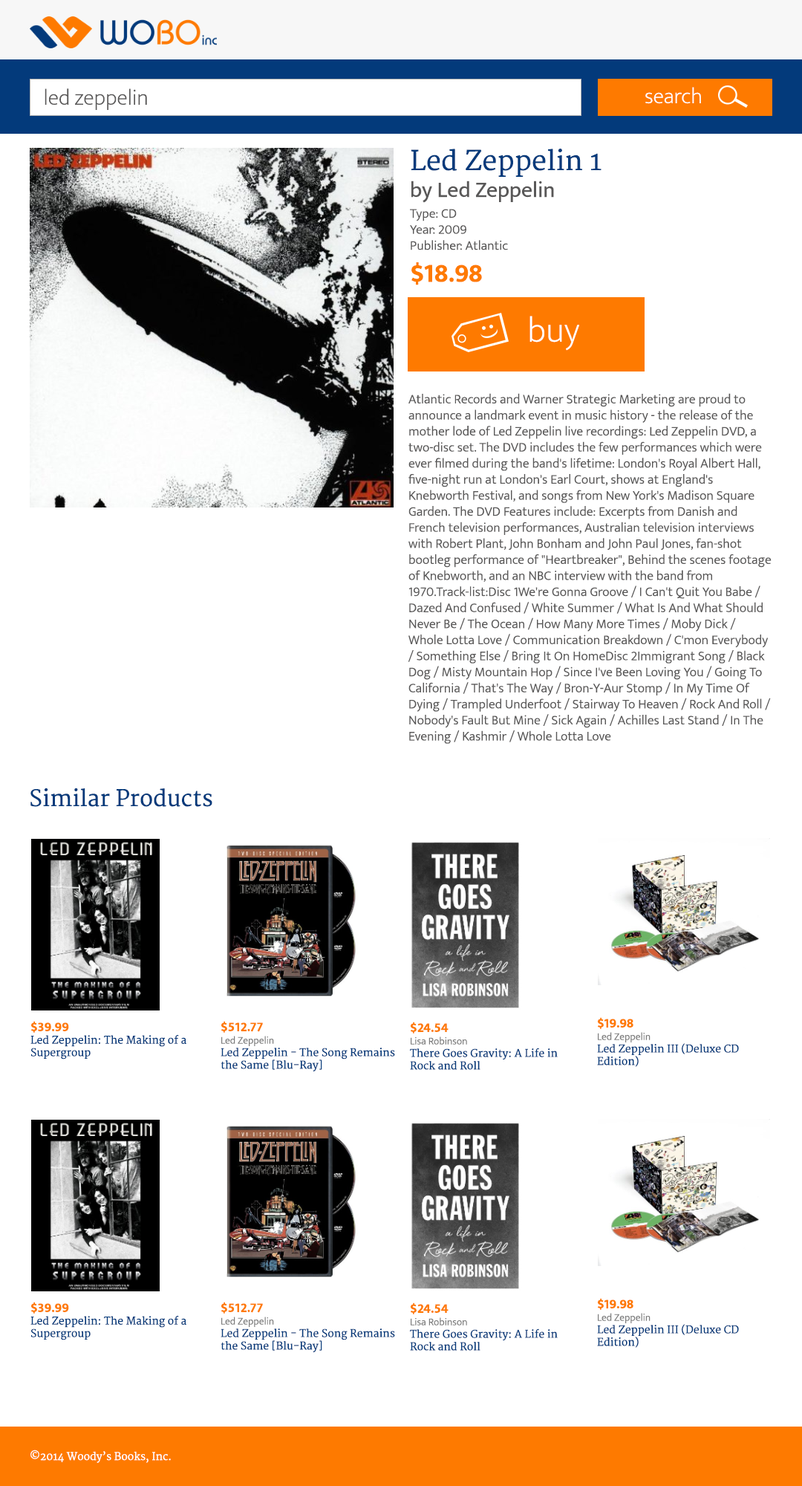
<style>
.page{position:relative;width:802px;height:1486px;background:#ffffff}
.page>*{position:absolute;margin:0}
.t1{font:22.3px "EkMukta-ExtraLight";color:#595858}
.t2{font:22.3px "EkMukta-ExtraLight";color:#ffffff}
.t3{font:13.4px "EkMukta-Light";color:#595858}
.t4{font:26.8px "Merriweather";color:#033a7b}
.t5{font:22.3px "EkMukta-Regular";color:#595858}
.t6{font:13.4px/20.8px "EkMukta-Light";color:#595858}
.t7{font:26.8px "EkMukta-Bold";color:#fe7a00}
.t8{font:35.7px "EkMukta-ExtraLight";color:#ffffff}
.t9{font:22.3px "Merriweather";color:#033a7b}
.t10{font:10.4px "Merriweather";color:#033a7b}
.t11{font:13.4px "EkMukta-Bold";color:#fe7a00}
.t12{font:10.4px "EkMukta-Light";color:#7b7b7b}
.t13{font:10.4px "Merriweather";color:#ffffff}
</style>
<div class="page">
<p class="t1" style="left:45px;top:88px;width:102px;height:22px">led zeppelin</p>
<p class="t2" style="left:646px;top:87px;width:55px;height:17px">search</p>
<p class="t3" style="left:410px;top:149px;width:192px;height:136px"><span class="t4">Led Zeppelin 1<br></span><span class="t5">by Led Zeppelin<br></span><span class="t6">Type: CD<br></span>Year: 2009<br>Publisher: Atlantic<br><span class="t7">$18.98</span></p>
<p class="t8" style="left:530px;top:316px;width:50px;height:35px">buy</p>
<p class="t3" style="left:408px;top:393px;width:364px;height:351px">Atlantic Records and Warner Strategic Marketing are proud to announce a landmark event in music history - the release of the mother lode of Led Zeppelin live recordings: Led Zeppelin DVD, a two-disc set. The DVD includes the few performances which were ever filmed during the band's lifetime: London's Royal Albert Hall, five-night run at London's Earl Court, shows at England's Knebworth Festival, and songs from New York's Madison Square Garden. The DVD Features include: Excerpts from Danish and French television performances, Australian television interviews with Robert Plant, John Bonham and John Paul Jones, fan-shot bootleg performance of "Heartbreaker", Behind the scenes footage of Knebworth, and an NBC interview with the band from 1970.Track-list:Disc 1We're Gonna Groove / I Can't Quit You Babe / Dazed And Confused / White Summer / What Is And What Should Never Be / The Ocean / How Many More Times / Moby Dick / Whole Lotta Love / Communication Breakdown / C'mon Everybody / Something Else / Bring It On HomeDisc 2Immigrant Song / Black Dog / Misty Mountain Hop / Since I've Been Loving You / Going To California / That's The Way / Bron-Y-Aur Stomp / In My Time Of Dying / Trampled Underfoot / Stairway To Heaven / Rock And Roll / Nobody's Fault But Mine / Sick Again / Achilles Last Stand / In The Evening / Kashmir / Whole Lotta Love</p>
<p class="t9" style="left:30px;top:788px;width:182px;height:19px">Similar Products</p>
<p class="t10" style="left:30px;top:1021px;width:156px;height:39px"><span class="t11">$39.99<br></span>Led Zeppelin: The Making of a Supergroup</p>
<p class="t10" style="left:221px;top:1021px;width:174px;height:50px"><span class="t11">$512.77<br></span><span class="t12">Led Zeppelin<br></span>Led Zeppelin - The Song Remains the Same [Blu-Ray]</p>
<p class="t10" style="left:410px;top:1022px;width:148px;height:48px"><span class="t11">$24.54<br></span><span class="t12">Lisa Robinson<br></span>There Goes Gravity: A Life in Rock and Roll</p>
<p class="t10" style="left:597px;top:1017px;width:142px;height:50px"><span class="t11">$19.98<br></span><span class="t12">Led Zeppelin<br></span>Led Zeppelin III (Deluxe CD Edition)</p>
<p class="t10" style="left:30px;top:1302px;width:156px;height:38px"><span class="t11">$39.99<br></span>Led Zeppelin: The Making of a Supergroup</p>
<p class="t10" style="left:221px;top:1302px;width:174px;height:50px"><span class="t11">$512.77<br></span><span class="t12">Led Zeppelin<br></span>Led Zeppelin - The Song Remains the Same [Blu-Ray]</p>
<p class="t10" style="left:597px;top:1298px;width:142px;height:50px"><span class="t11">$19.98<br></span><span class="t12">Led Zeppelin<br></span>Led Zeppelin III (Deluxe CD Edition)</p>
<p class="t10" style="left:410px;top:1302px;width:148px;height:49px"><span class="t11">$24.54<br></span><span class="t12">Lisa Robinson<br></span>There Goes Gravity: A Life in Rock and Roll</p>
<p class="t13" style="left:30px;top:1450px;width:141px;height:13px">©2014 Woody’s Books, Inc.</p>
</div>
